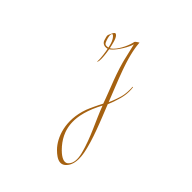
<style>
.page{position:relative;width:192px;height:192px;background:#ffffff}
.page>*{position:absolute;margin:0}
.t1{font:120px "Miama";color:#a56110}
</style>
<div class="page">
<p class="t1" style="left:57px;top:33px;width:83px;height:132px">J</p>
</div>
